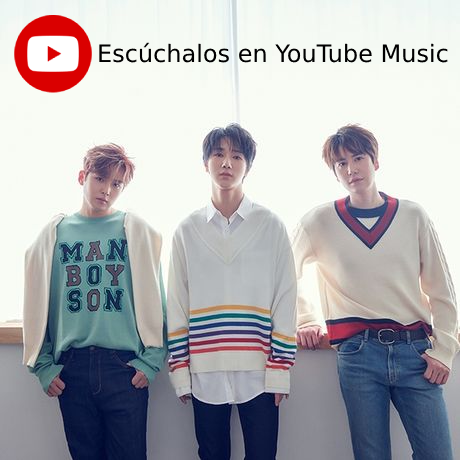
<style>
.page{position:relative;width:460px;height:460px;background:#f9fcf5}
.page>*{position:absolute;margin:0}
.t1{font:24px "DejaVuSans";color:#000000}
</style>
<div class="page">
<p class="t1" style="left:99px;top:42px;width:349px;height:21px">Escúchalos en YouTube Music</p>
</div>
